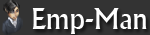
<style>
.page{position:relative;width:150px;height:35px;background:#333333}
.page>*{position:absolute;margin:0}
.t1{font:31.3px "Narkisim";color:#fefefe}
</style>
<div class="page">
<p class="t1" style="left:32px;top:8px;width:115px;height:26px">Emp-Man</p>
</div>
